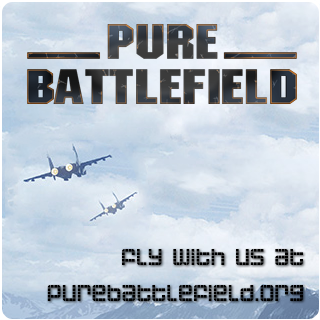
<style>
.page{position:relative;width:320px;height:320px}
.page>*{position:absolute;margin:0}
.t1{font:30px "Astronaut";color:#000000}
</style>
<div class="page">
<p class="t1" style="left:47px;top:249px;width:256px;height:52px;text-align:right">fly with us at<br>purebattlefield.org</p>
</div>
